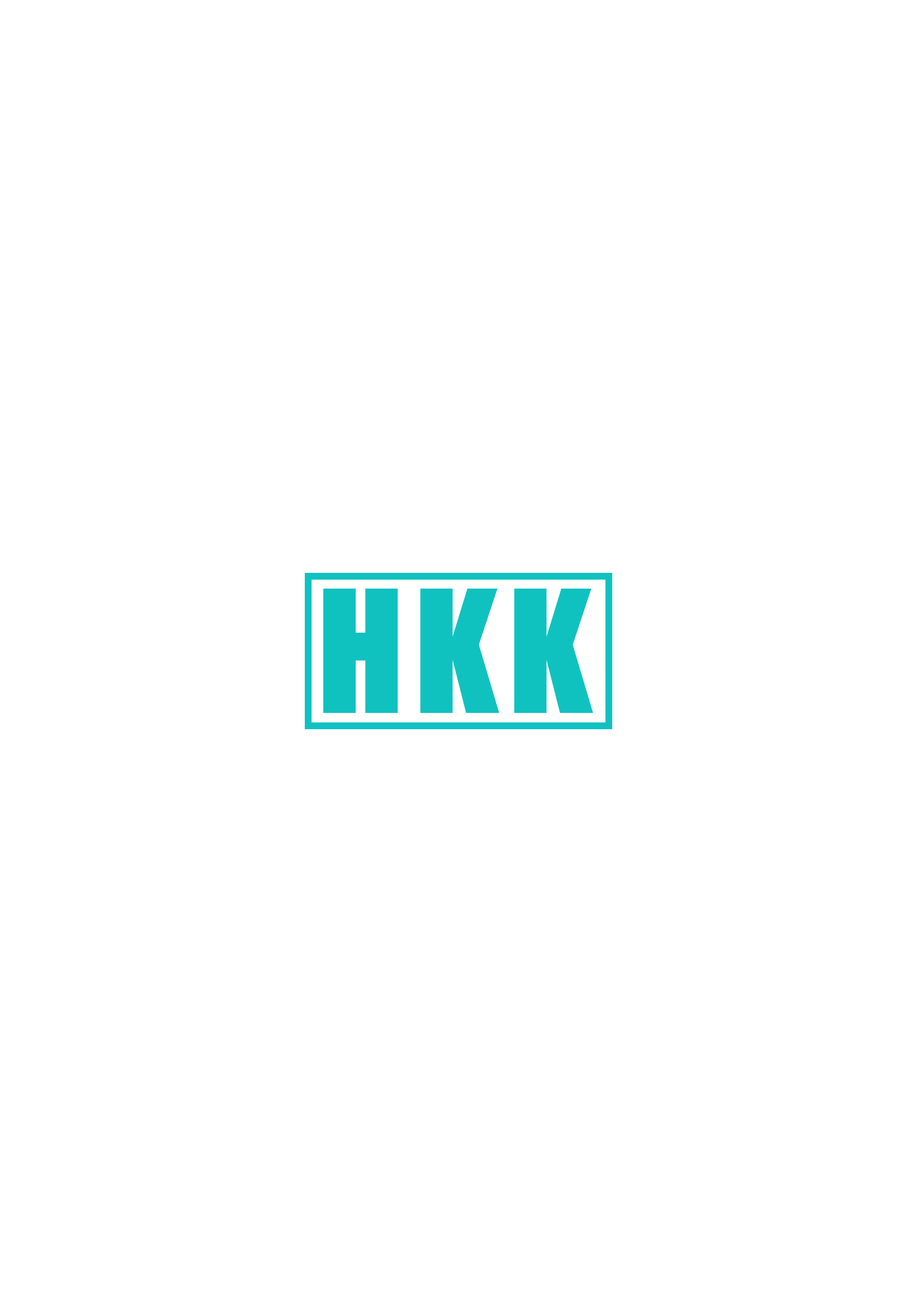
<style>
.page{position:relative;width:917px;height:1301px;background:#ffffff}
.page>*{position:absolute;margin:0}
.t1{font:157.3px "Impact";letter-spacing:0.06em;color:#0fc2c0}
</style>
<div class="page">
<p class="t1" style="left:323px;top:588px;width:270px;height:125px">HKK</p>
</div>
